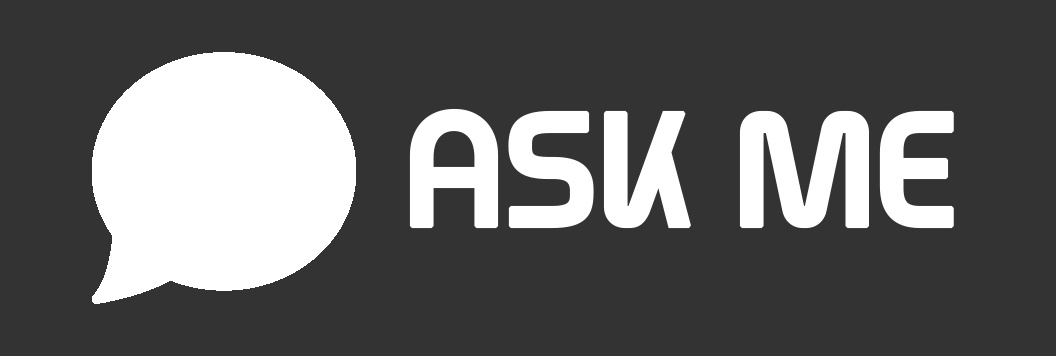
<style>
.page{position:relative;width:1056px;height:356px;background:#333333}
.page>*{position:absolute;margin:0}
.t1{font:150px "ExploreEveryday-Regular";color:#ffffff;font-weight:bold}
</style>
<div class="page">
<p class="t1" style="left:409px;top:108px;width:545px;height:121px">ASK ME</p>
</div>
